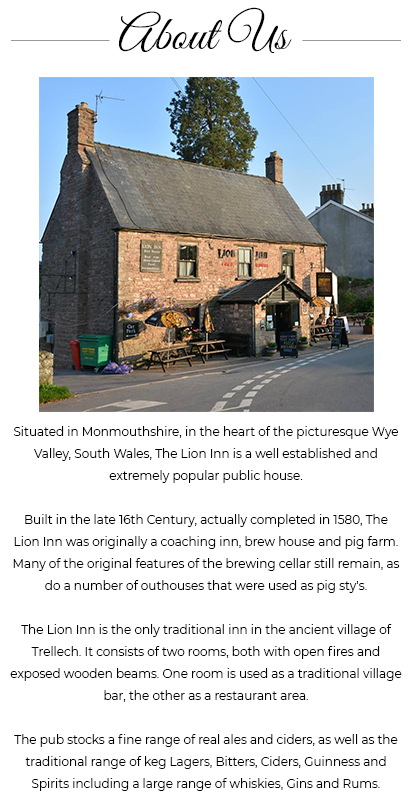
<style>
.page{position:relative;width:414px;height:803px;background:#ffffff}
.page>*{position:absolute;margin:0}
.t1{font:48.6px "GreatVibes-Regular";color:#000000}
.t2{font:12px/22px "Montserrat-Regular";color:#000000}
</style>
<div class="page">
<p class="t1" style="left:119px;top:7px;width:173px;height:46px">About Us</p>
<p class="t2" style="left:10px;top:426px;width:392px;height:365px;text-align:center">Situated in Monmouthshire, in the heart of the picturesque Wye Valley, South Wales, The Lion Inn is a well established and extremely popular public house. <br><br>Built in the late 16th Century, actually completed in 1580, The Lion Inn was originally a coaching inn, brew house and pig farm. Many of the original features of the brewing cellar still remain, as do a number of outhouses that were used as pig sty's.<br><br>The Lion Inn is the only traditional inn in the ancient village of Trellech. It consists of two rooms, both with open fires and exposed wooden beams. One room is used as a traditional village bar, the other as a restaurant area.<br><br>The pub stocks a fine range of real ales and ciders, as well as the traditional range of keg Lagers, Bitters, Ciders, Guinness and Spirits including a large range of whiskies, Gins and Rums.<br><br>The whole emphasis of the pub is towards the traditional - Traditional Beers, Real Ciders, Quality Home Made Food and a Friendly atmosphere.</p>
</div>
